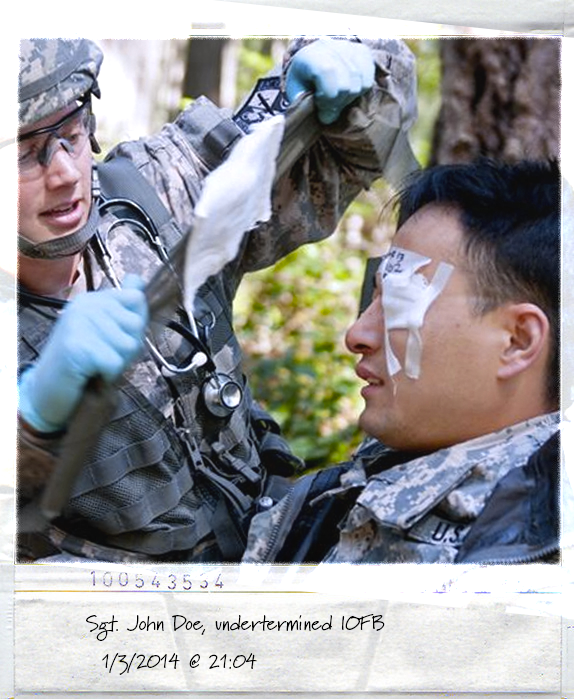
<style>
.page{position:relative;width:574px;height:699px}
.page>*{position:absolute;margin:0}
.t1{font:20.9px/38.2px "Marydale-Regular";color:#000000}
</style>
<div class="page">
<p class="t1" style="left:86px;top:614px;width:299px;height:61px">Sgt. John Doe, undertermined IOFB<br>  1/3/2014 @ 21:04</p>
</div>
